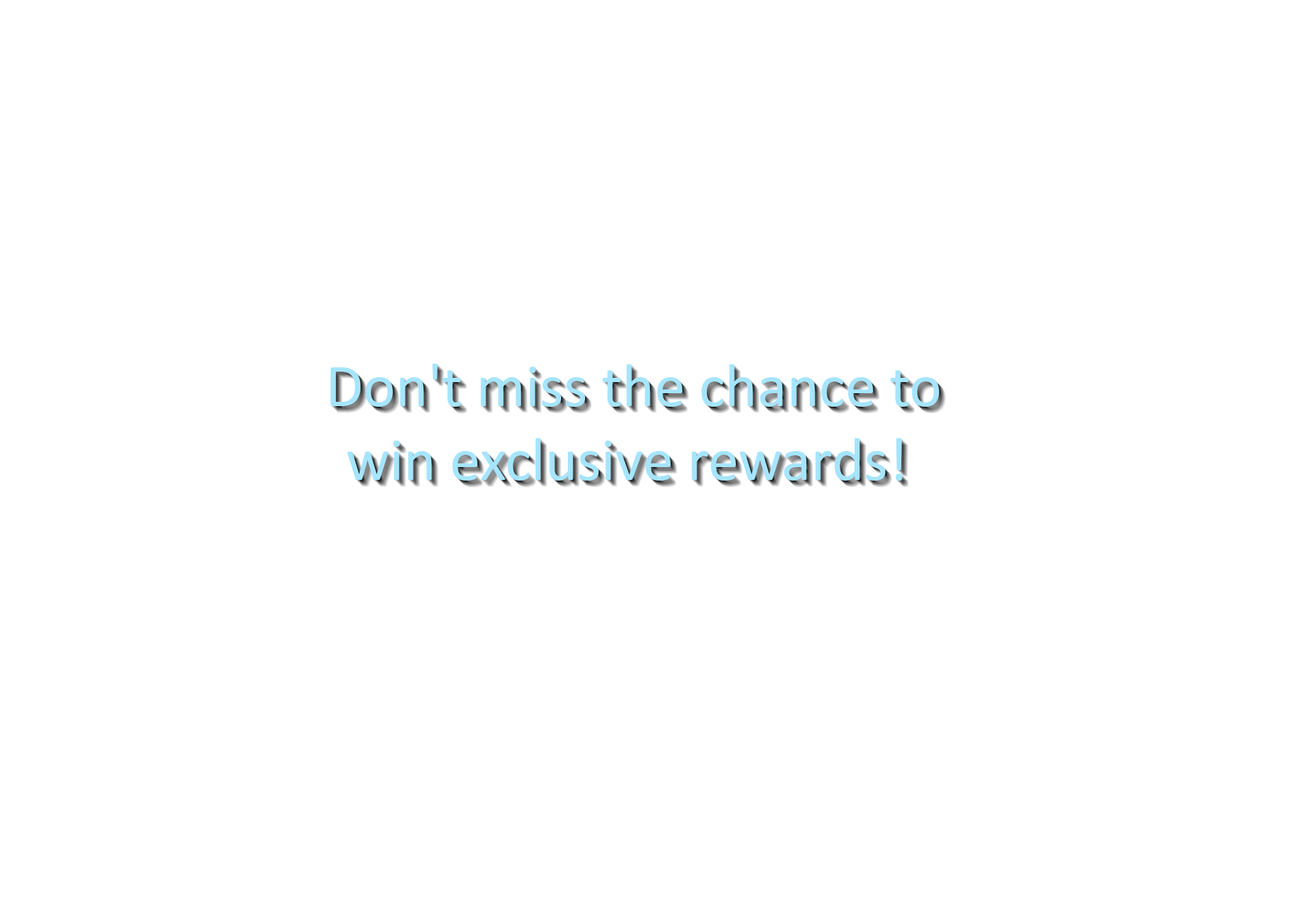
<style>
.page{position:relative;width:1292px;height:923px;background:#ffffff}
.page>*{position:absolute;margin:0}
.t1{font:61.5px "Calibri";color:#a5e5fd}
</style>
<div class="page">
<p class="t1" style="left:330px;top:364px;width:610px;height:117px;text-align:center">Don't miss the chance to win exclusive rewards!</p>
</div>
